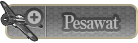
<style>
.page{position:relative;width:138px;height:43px}
.page>*{position:absolute;margin:0}
.t1{font:18px "RyuminPro-ExBold";letter-spacing:-0.08em;color:#b8b8b8;scale:0.9 1}
</style>
<div class="page">
<p class="t1" style="left:64px;top:15px;width:55px;height:15px">Pesawat</p>
</div>
